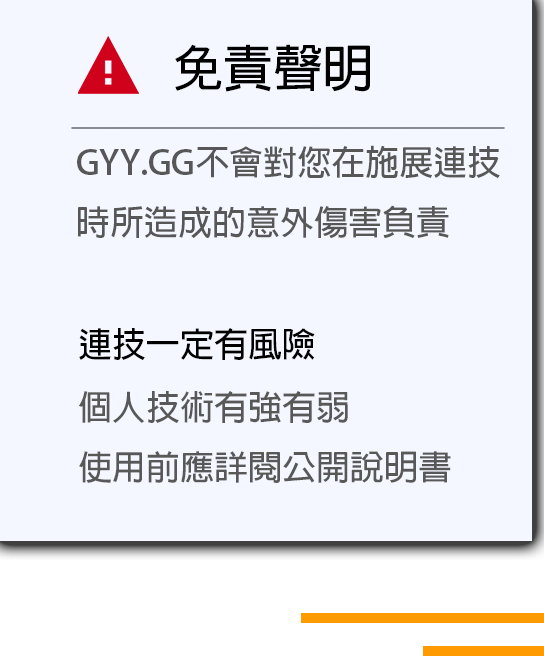
<style>
.page{position:relative;width:544px;height:656px;background:#f4f7ff}
.page>*{position:absolute;margin:0}
.t1{font:50px "AdobeFanHeitiStd-Bold";color:#000000}
.t2{font:34px "AdobeFanHeitiStd-Bold";color:#575757}
.t3{font:34px "AdobeFanHeitiStd-Bold";color:#000000}
.t4{font:34px "AdobeFanHeitiStd-Bold";color:#585858}
</style>
<div class="page">
<p class="t1" style="left:175px;top:44px;width:195px;height:48px">免責聲明</p>
<p class="t2" style="left:77px;top:145px;width:423px;height:94px">GYY.GG不會對您在施展連技<br>時所造成的意外傷害負責</p>
<p class="t3" style="left:79px;top:328px;width:236px;height:32px">連技一定有風險</p>
<p class="t4" style="left:79px;top:391px;width:372px;height:92px">個人技術有強有弱<br>使用前應詳閱公開說明書</p>
</div>
